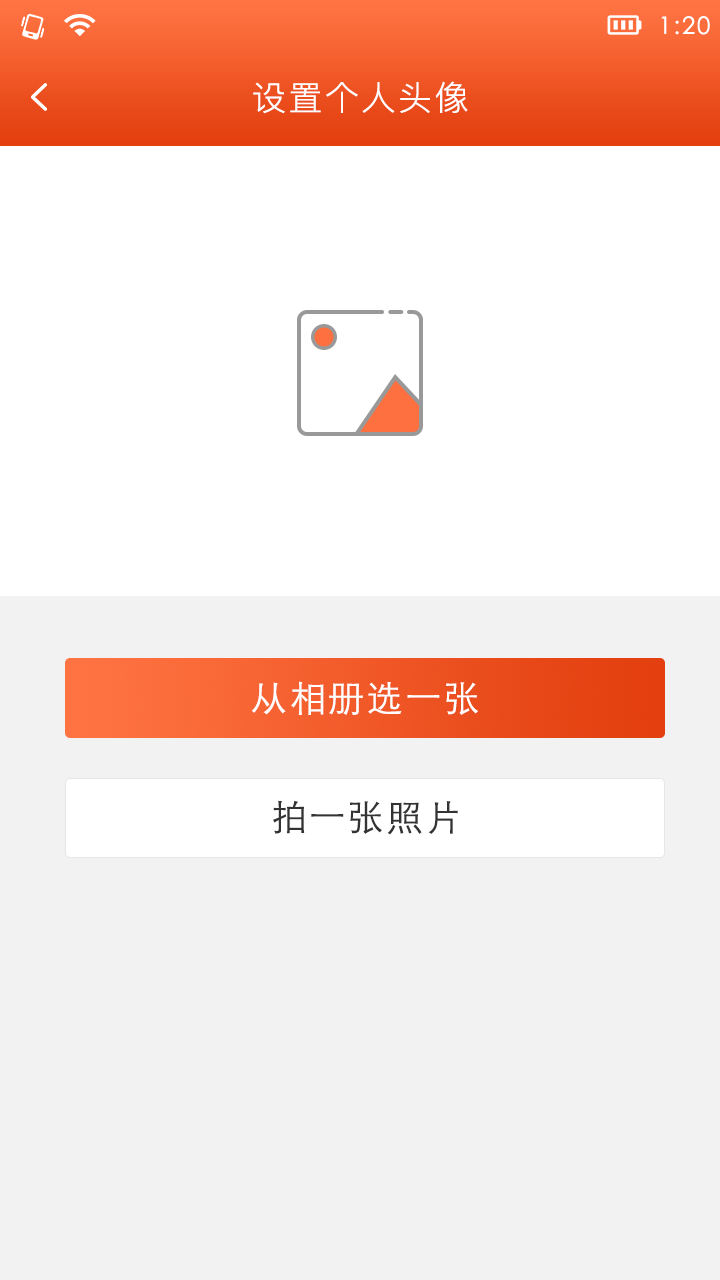
<style>
.page{position:relative;width:720px;height:1280px;background:#f2f2f2}
.page>*{position:absolute;margin:0}
.t1{font:24px "STXihei";letter-spacing:0.075em;color:#ffffff}
.t2{font:34px "PingFangSC-Light";letter-spacing:0.075em;color:#ffffff}
.t3{font:36px "STHeitiSC-Light";letter-spacing:0.075em;color:#ffffff}
.t4{font:36px "STHeitiSC-Light";letter-spacing:0.075em;color:#333333}
</style>
<div class="page">
<p class="t1" style="left:661px;top:16px;width:49px;height:19px">1:20</p>
<p class="t2" style="left:253px;top:81px;width:215px;height:33px">设置个人头像</p>
<p class="t3" style="left:251px;top:681px;width:227px;height:34px">从相册选一张</p>
<p class="t4" style="left:273px;top:800px;width:185px;height:35px">拍一张照片</p>
</div>
